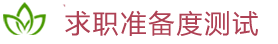
<style>
.page{position:relative;width:278px;height:44px;background:#ffffff}
.page>*{position:absolute;margin:0}
.t1{font:26px "MicrosoftYaHei";letter-spacing:0.075em;color:#ae4154}
</style>
<div class="page">
<p class="t1" style="left:65px;top:10px;width:193px;height:26px">求职准备度测试</p>
</div>
